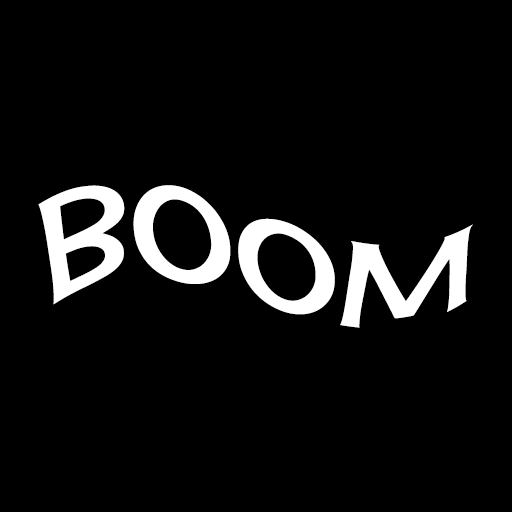
<style>
.page{position:relative;width:512px;height:512px;background:#000000}
.page>*{position:absolute;margin:0}
.t1{font:124.5px "CherryCreamSoda";letter-spacing:0.025em;color:#ffffff;scale:0.91 1}
</style>
<div class="page">
<p class="t1" style="left:38px;top:185px;width:435px;height:143px">BOOM</p>
</div>
